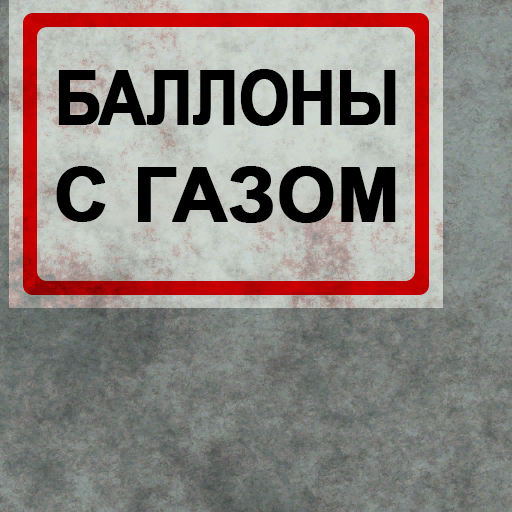
<style>
.page{position:relative;width:512px;height:512px}
.page>*{position:absolute;margin:0}
.t1{font:75px/97px "Arial-BoldMT";letter-spacing:-0.02em;color:#000000;font-weight:bold;scale:0.86 1}
.t2{font:75px/97px "Arial-BoldMT";color:#000000;font-weight:bold}
</style>
<div class="page">
<p class="t1" style="left:56px;top:69px;width:340px;height:154px;text-align:center">БАЛЛОНЫ<br><span class="t2">С ГАЗОМ</span></p>
</div>
